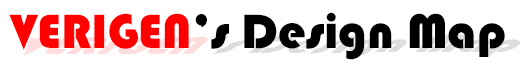
<style>
.page{position:relative;width:523px;height:68px;background:#ffffff}
.page>*{position:absolute;margin:0}
.t1{font:50px "Bauhaus93";color:#000000}
.t2{font:50px "Bauhaus93";color:#ff0000}
</style>
<div class="page">
<p class="t1" style="left:9px;top:12px;width:496px;height:48px"><span class="t2">VERIGEN</span>’s Design Map</p>
</div>
